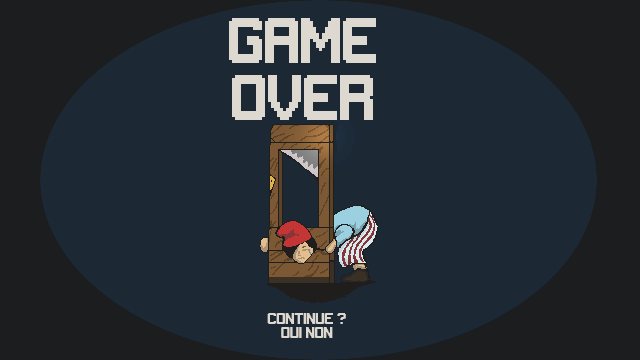
<style>
.page{position:relative;width:640px;height:360px;background:#1c2834}
.page>*{position:absolute;margin:0}
.t1{font:48px "Gameplay";color:#ded9d0}
.t2{font:12px "Gameplay";color:#ded9d0}
</style>
<div class="page">
<p class="t1" style="left:229px;top:18px;width:147px;height:102px;text-align:center">GAME<br>OVER</p>
<p class="t2" style="left:267px;top:313px;width:79px;height:25px;text-align:center">CONTINUE ?<br>oui non</p>
</div>
